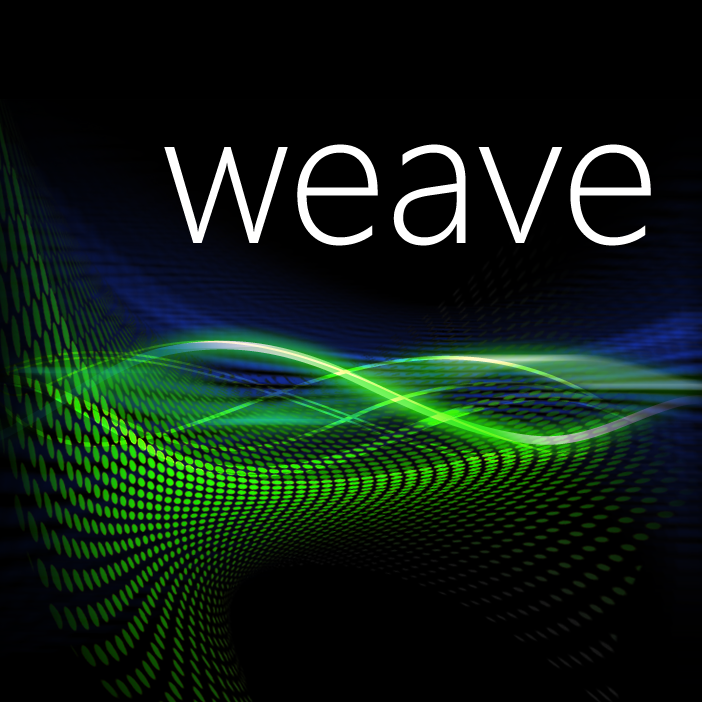
<style>
.page{position:relative;width:702px;height:702px;background:#000000}
.page>*{position:absolute;margin:0}
.t1{font:192px "SegoeWP-Light";letter-spacing:-0.01em;color:#ffffff}
</style>
<div class="page">
<p class="t1" style="left:164px;top:144px;width:487px;height:102px">weave</p>
</div>
